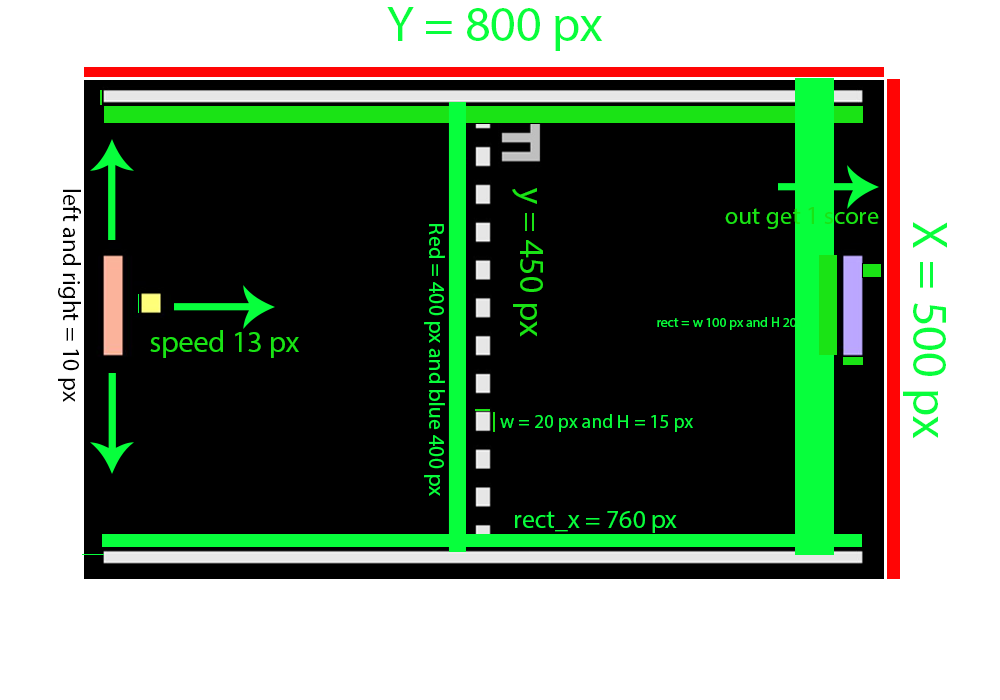
<style>
.page{position:relative;width:1000px;height:700px;background:#000000}
.page>*{position:absolute;margin:0}
.t1{font:50px "MyriadPro-Regular";color:#08fe3c}
.t2{font:24.7px "MyriadPro-Regular";color:#010101}
.t3{font:35.1px "MyriadPro-Regular";color:#1ae315}
.t4{font:25px "MyriadPro-Regular";color:#1ae315}
.t5{font:22.3px "MyriadPro-Regular";color:#08fe3c}
.t6{font:13.7px "MyriadPro-Regular";color:#08fe3c}
.t7{font:30px "MyriadPro-Regular";color:#1ae315}
.t8{font:19.4px "MyriadPro-Regular";color:#08fe3c}
.t9{font:25.7px "MyriadPro-Regular";color:#08fe3c}
</style>
<div class="page">
<p class="t1" style="left:387px;top:7px;width:216px;height:44px">Y = 800 px</p>
<p class="t2" style="left:58px;top:189px;width:23px;height:213px;rotate:90deg">left and right = 10 px</p>
<p class="t3" style="left:512px;top:188px;width:31px;height:149px;rotate:90deg">y = 450 px</p>
<p class="t4" style="left:725px;top:207px;width:154px;height:22px">out get 1 score</p>
<p class="t1" style="left:903px;top:222px;width:44px;height:217px;rotate:90deg">X = 500 px</p>
<p class="t5" style="left:424px;top:224px;width:21px;height:272px;rotate:90deg">Red = 400 px and blue 400 px</p>
<p class="t6" style="left:657px;top:317px;width:157px;height:13px">rect = w 100 px and H 20 px</p>
<p class="t7" style="left:150px;top:330px;width:149px;height:28px">speed 13 px</p>
<p class="t8" style="left:500px;top:414px;width:193px;height:18px">w = 20 px and H = 15 px</p>
<p class="t9" style="left:515px;top:511px;width:162px;height:22px">rect_x = 760 px</p>
</div>
